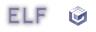
<style>
.page{position:relative;width:96px;height:32px;background:#ffffff}
.page>*{position:absolute;margin:0}
.t1{font:24px "ElyRounded-Heavy";letter-spacing:0.025em}
</style>
<div class="page">
<p class="t1" style="left:8px;top:7px;width:39px;height:17px">ELF</p>
</div>
